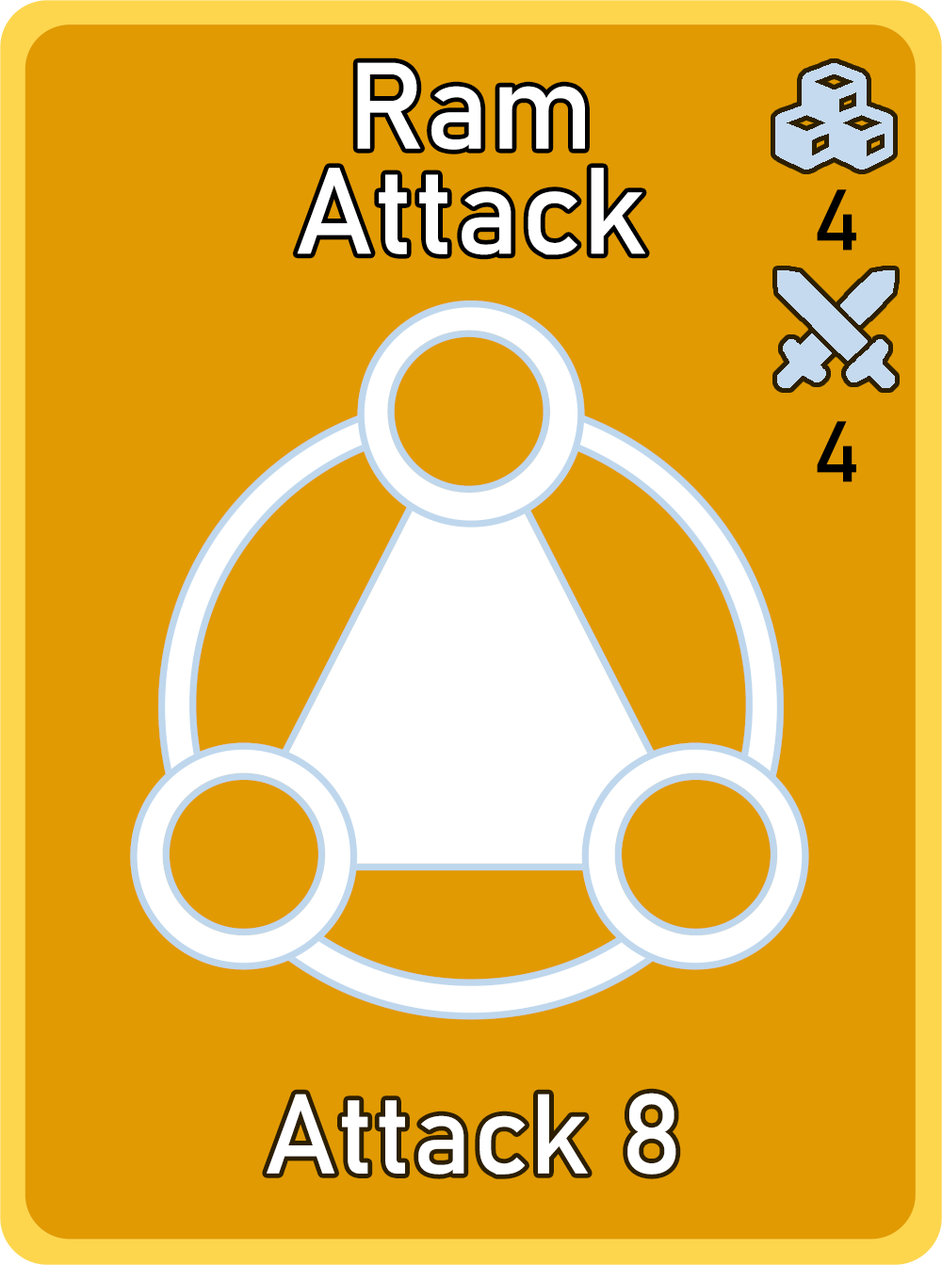
<style>
.page{position:relative;width:942px;height:1265px;background:#e19a02}
.page>*{position:absolute;margin:0}
.t1{font:120.6px/105.1px "Bahnschrift";letter-spacing:0.01em;color:#ffffff}
.t2{font:85px "Bahnschrift";letter-spacing:0.01em;color:#000000}
.t3{font:111.3px "Bahnschrift";letter-spacing:0.01em;color:#ffffff}
</style>
<div class="page">
<p class="t1" style="left:297px;top:62px;width:348px;height:193px;text-align:center">Ram<br>Attack</p>
<p class="t2" style="left:817px;top:189px;width:40px;height:62px">4</p>
<p class="t2" style="left:817px;top:421px;width:40px;height:61px">4</p>
<p class="t3" style="left:267px;top:1093px;width:410px;height:82px">Attack 8</p>
</div>
